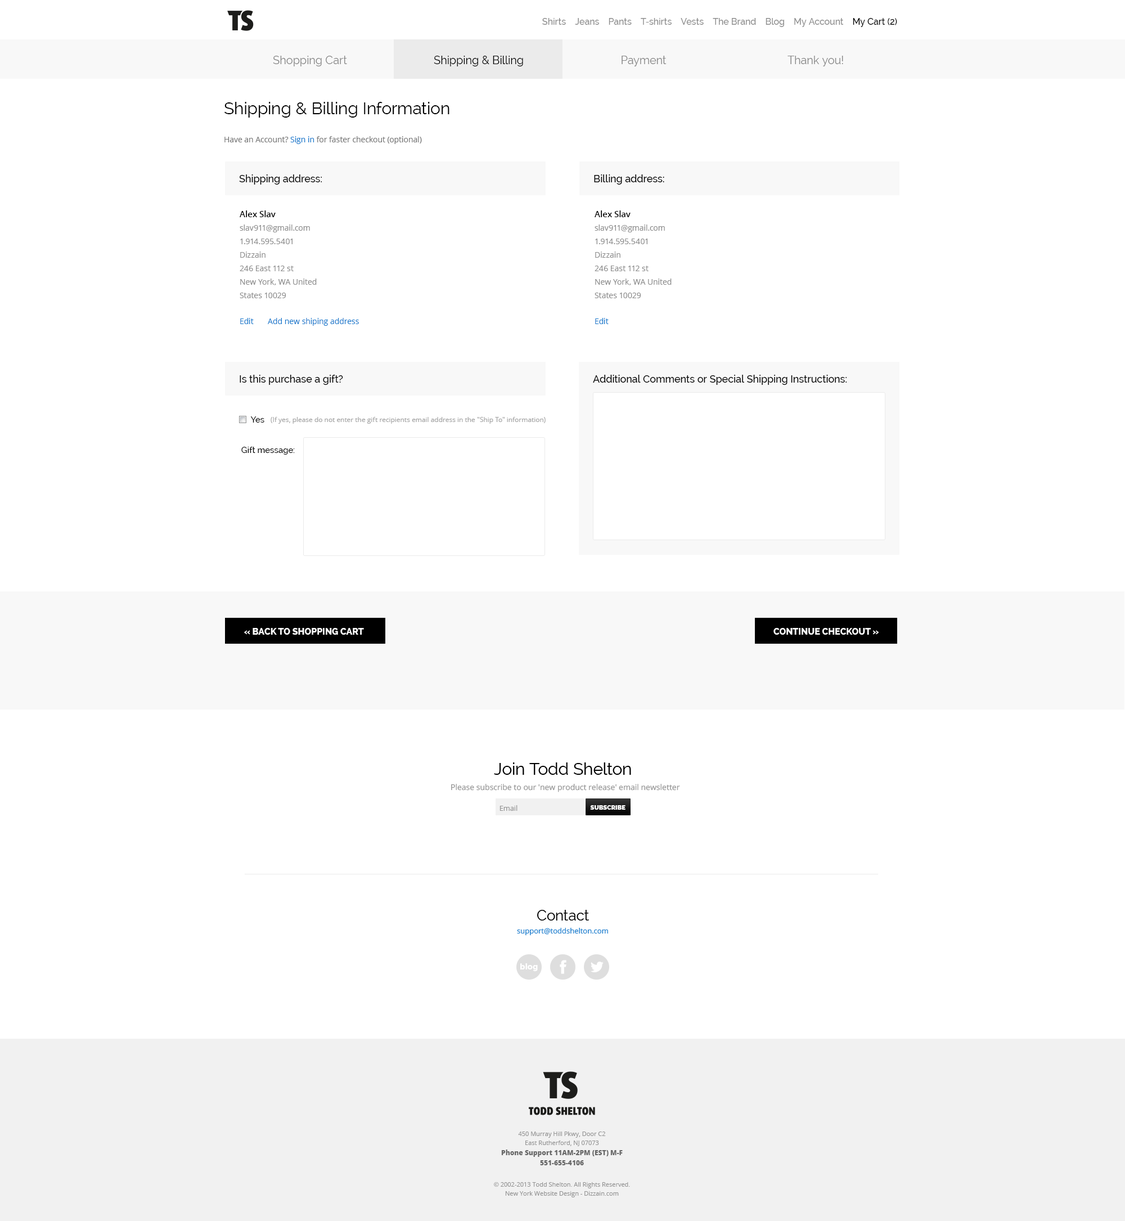
<style>
.page{position:relative;width:1125px;height:1221px;background:#ffffff}
.page>*{position:absolute;margin:0}
.t1{font:9px "Raleway-Medium";color:#8b8b8b}
.t2{font:9px "Raleway-Medium";color:#000000}
.t3{font:11.2px "Raleway";color:#878787}
.t4{font:11.2px "Raleway";color:#000000}
.t5{font:16.9px "Raleway";color:#000000}
.t6{font:7.9px "OpenSans";color:#757575}
.t7{font:7.9px "OpenSans";color:#1c7ccd}
.t8{font:10.1px "Raleway-Medium";color:#000000}
.t9{font:7.9px/13.5px "OpenSans";color:#8c8c8c}
.t10{font:8.4px/28.1px "OpenSans-Semibold";color:#000000}
.t11{font:8.4px "Raleway-Medium";color:#000000}
.t12{font:6.8px "OpenSans";color:#a3a3a3}
.t13{font:9px "Raleway-ExtraBold";color:#ffffff;text-transform:uppercase}
</style>
<div class="page">
<p class="t1" style="left:542px;top:18px;width:355px;height:9px">Shirts    Jeans    Pants    T-shirts    Vests    The Brand    Blog    My Account    <span class="t2">My Cart (2)</span></p>
<p class="t3" style="left:273px;top:56px;width:74px;height:10px">Shopping Cart</p>
<p class="t4" style="left:434px;top:56px;width:89px;height:10px">Shipping &amp; Billing</p>
<p class="t3" style="left:622px;top:56px;width:45px;height:10px">Payment</p>
<p class="t3" style="left:788px;top:56px;width:55px;height:10px">Thank you!</p>
<p class="t5" style="left:224px;top:102px;width:225px;height:16px">Shipping &amp; Billing Information</p>
<p class="t6" style="left:224px;top:136px;width:198px;height:8px">Have an Account? <span class="t7">Sign in</span> for faster checkout (optional)</p>
<p class="t8" style="left:239px;top:174px;width:83px;height:10px">Shipping address:</p>
<p class="t8" style="left:594px;top:174px;width:70px;height:10px">Billing address:</p>
<p class="t9" style="left:240px;top:210px;width:77px;height:88px"><span class="t10">Alex Slav<br></span>slav911@gmail.com<br>1.914.595.5401<br>Dizzain<br>246 East 112 st<br>New York, WA United States 10029</p>
<p class="t9" style="left:595px;top:210px;width:77px;height:88px"><span class="t10">Alex Slav<br></span>slav911@gmail.com<br>1.914.595.5401<br>Dizzain<br>246 East 112 st<br>New York, WA United States 10029</p>
<p class="t7" style="left:240px;top:318px;width:119px;height:8px">Edit       Add new shiping address</p>
<p class="t7" style="left:595px;top:318px;width:14px;height:6px">Edit</p>
<p class="t8" style="left:240px;top:375px;width:103px;height:10px">Is this purchase a gift?</p>
<p class="t8" style="left:593px;top:375px;width:254px;height:10px">Additional Comments or Special Shipping Instructions:</p>
<p class="t11" style="left:250px;top:416px;width:14px;height:6px">Yes</p>
<p class="t12" style="left:271px;top:417px;width:275px;height:7px">(If yes, please do not enter the gift recipients email address in the "Ship To" information)</p>
<p class="t11" style="left:241px;top:447px;width:54px;height:7px">Gift message:</p>
<p class="t13" style="left:244px;top:628px;width:120px;height:6px">« BACK TO SHOPPING CART</p>
<p class="t13" style="left:773px;top:628px;width:106px;height:6px">Continue Checkout »</p>
<p class="t13" style="left:773px;top:628px;width:106px;height:6px">Continue Checkout »</p>
</div>
